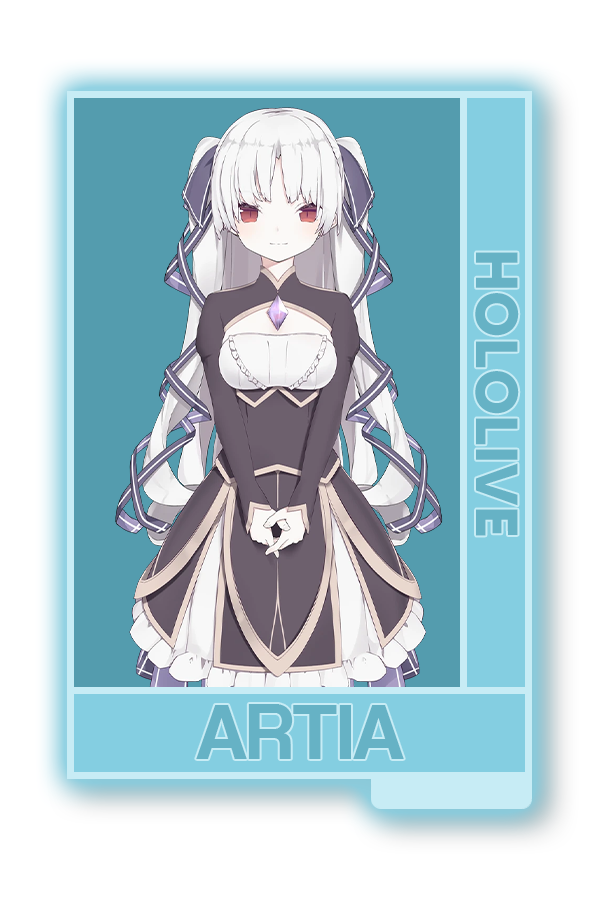
<style>
.page{position:relative;width:600px;height:900px;background:#ffffff}
.page>*{position:absolute;margin:0}
.t1{font:59.2px "MADETOMMY-Bold";color:#66b2c5}
.t2{font:80.1px "CoolveticaRg-Regular";color:#66b2c5}
</style>
<div class="page">
<p class="t1" style="left:475px;top:252px;width:44px;height:284px;rotate:90deg">HOLOLIVE</p>
<p class="t2" style="left:196px;top:704px;width:208px;height:55px">ARTIA</p>
</div>
